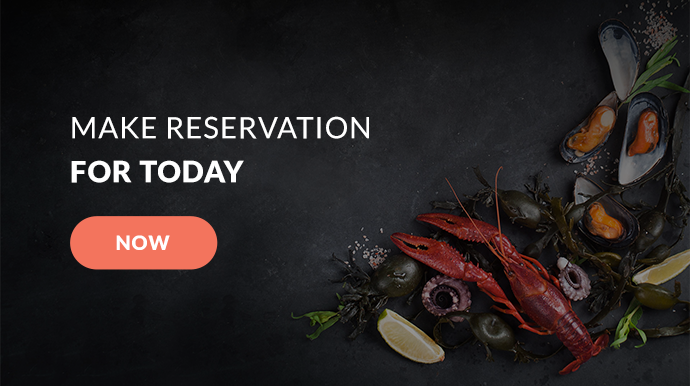
<style>
.page{position:relative;width:690px;height:386px}
.page>*{position:absolute;margin:0}
.t1{font:29.4px/44.1px "Lato-Regular";letter-spacing:0.035em;color:#ffffff}
.t2{font:29.4px/44.1px "Lato-Black";letter-spacing:0.035em;color:#ffffff}
.t3{font:20px "Lato-Black";letter-spacing:0.035em;color:#ffffff}
</style>
<div class="page">
<p class="t1" style="left:71px;top:116px;width:298px;height:67px">MAKE RESERVATION<br><span class="t2">FOR TODAY</span></p>
<p class="t3" style="left:116px;top:235px;width:54px;height:15px">NOW</p>
</div>
